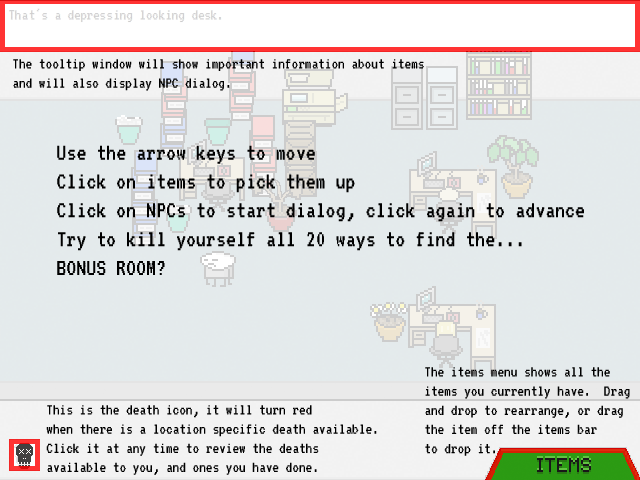
<style>
.page{position:relative;width:640px;height:480px;background:#e4eaec}
.page>*{position:absolute;margin:0}
.t1{font:16px "VT323";color:#000000}
.t2{font:24px "VT323";color:#000000}
</style>
<div class="page">
<p class="t1" style="left:13px;top:59px;width:411px;height:32px">The tooltip window will show important information about items<br>and will also display NPC dialog.</p>
<p class="t2" style="left:57px;top:145px;width:527px;height:130px">Use the arrow keys to move<br>Click on items to pick them up<br>Click on NPCs to start dialog, click again to advance<br>Try to kill yourself all 20 ways to find the...<br>BONUS ROOM?</p>
<p class="t1" style="left:425px;top:367px;width:205px;height:89px">The items menu shows all the<br>items you currently have.  Drag<br>and drop to rearrange, or drag<br>the item off the items bar <br>to drop it.</p>
<p class="t1" style="left:46px;top:405px;width:331px;height:70px">This is the death icon, it will turn red<br>when there is a location specific death available.<br>Click it at any time to review the deaths<br>available to you, and ones you have done.</p>
</div>
